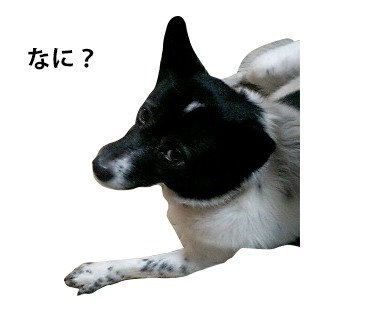
<style>
.page{position:relative;width:370px;height:320px;background:#ffffff}
.page>*{position:absolute;margin:0}
.t1{font:24px "KozGoPr6N-Bold";color:#000000}
</style>
<div class="page">
<p class="t1" style="left:28px;top:48px;width:66px;height:22px">なに？</p>
</div>
